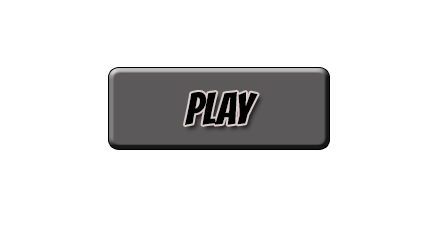
<style>
.page{position:relative;width:431px;height:239px;background:#ffffff}
.page>*{position:absolute;margin:0}
.t1{font:44.8px "Bangers-Regular";color:#000000}
</style>
<div class="page">
<p class="t1" style="left:185px;top:91px;width:73px;height:34px">PLAY</p>
</div>
